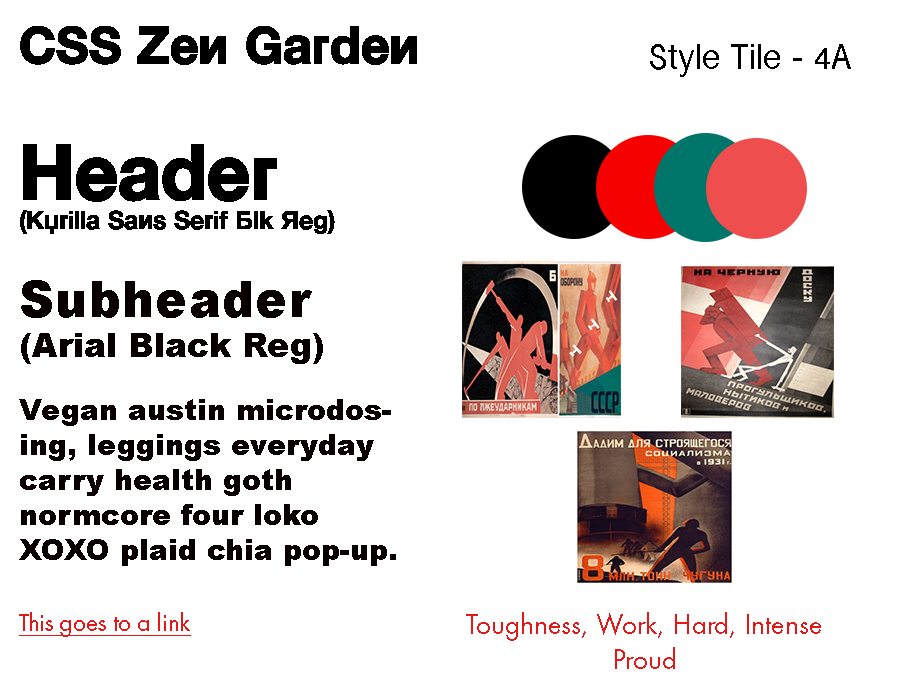
<style>
.page{position:relative;width:900px;height:700px;background:#ffffff}
.page>*{position:absolute;margin:0}
.t1{font:50px "KyrillaSansSerif-Black";color:#000000}
.t2{font:37.5px "InaiMathi";color:#000000}
.t3{font:25px "KyrillaSansSerif-Black";color:#000000}
.t4{font:75px "KyrillaSansSerif-Black";color:#000000}
.t5{font:33.3px "Arial-Black";color:#080000}
.t6{font:50px "Arial-Black";color:#080000}
.t7{font:29.2px "Arial-Black";color:#080000}
.t8{font:25px "FuturaPT-Book";color:#e51717;text-decoration:underline}
.t9{font:29.2px "FuturaPT-Book";color:#e51717}
</style>
<div class="page">
<p class="t1" style="left:20px;top:26px;width:397px;height:39px">CSS Zen Garden</p>
<p class="t2" style="left:650px;top:44px;width:201px;height:33px">Style Tile - 4A</p>
<p class="t3" style="left:20px;top:144px;width:315px;height:90px"><span class="t4">Header<br></span>(Kyrilla Sans Serif Blk Reg)</p>
<p class="t5" style="left:21px;top:280px;width:302px;height:84px"><span class="t6">Subheader<br></span>(Arial Black Reg)</p>
<p class="t7" style="left:19px;top:399px;width:377px;height:167px">Vegan austin microdosing, leggings everyday carry health goth normcore four loko XOXO plaid chia pop-up. Slow-carb kitsch sriracha, paleo VHS vinyl everyday carry umami squid pour-over.</p>
<p class="t8" style="left:19px;top:612px;width:172px;height:25px">This goes to a link</p>
<p class="t9" style="left:466px;top:612px;width:355px;height:57px;text-align:center">Toughness, Work, Hard, Intense<br>Proud</p>
</div>
